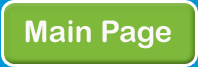
<style>
.page{position:relative;width:198px;height:67px;background:#7fb93c}
.page>*{position:absolute;margin:0}
.t1{font:30px "ArialRoundedMTBold";color:#fbf8f8}
</style>
<div class="page">
<p class="t1" style="left:25px;top:20px;width:146px;height:29px">Main Page</p>
</div>
